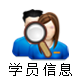
<style>
.page{position:relative;width:80px;height:80px;background:#ffffff}
.page>*{position:absolute;margin:0}
.t1{font:14px "NSimSun";letter-spacing:0.2em;color:#000000}
</style>
<div class="page">
<p class="t1" style="left:9px;top:63px;width:63px;height:13px">学员信息</p>
</div>
